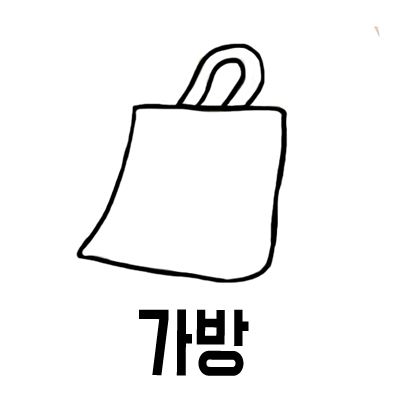
<style>
.page{position:relative;width:400px;height:400px;background:#ffffff}
.page>*{position:absolute;margin:0}
.t1{font:69.8px "BMDoHyeon";color:#000000;scale:0.84 1}
</style>
<div class="page">
<p class="t1" style="left:139px;top:309px;width:110px;height:67px">가방</p>
</div>
